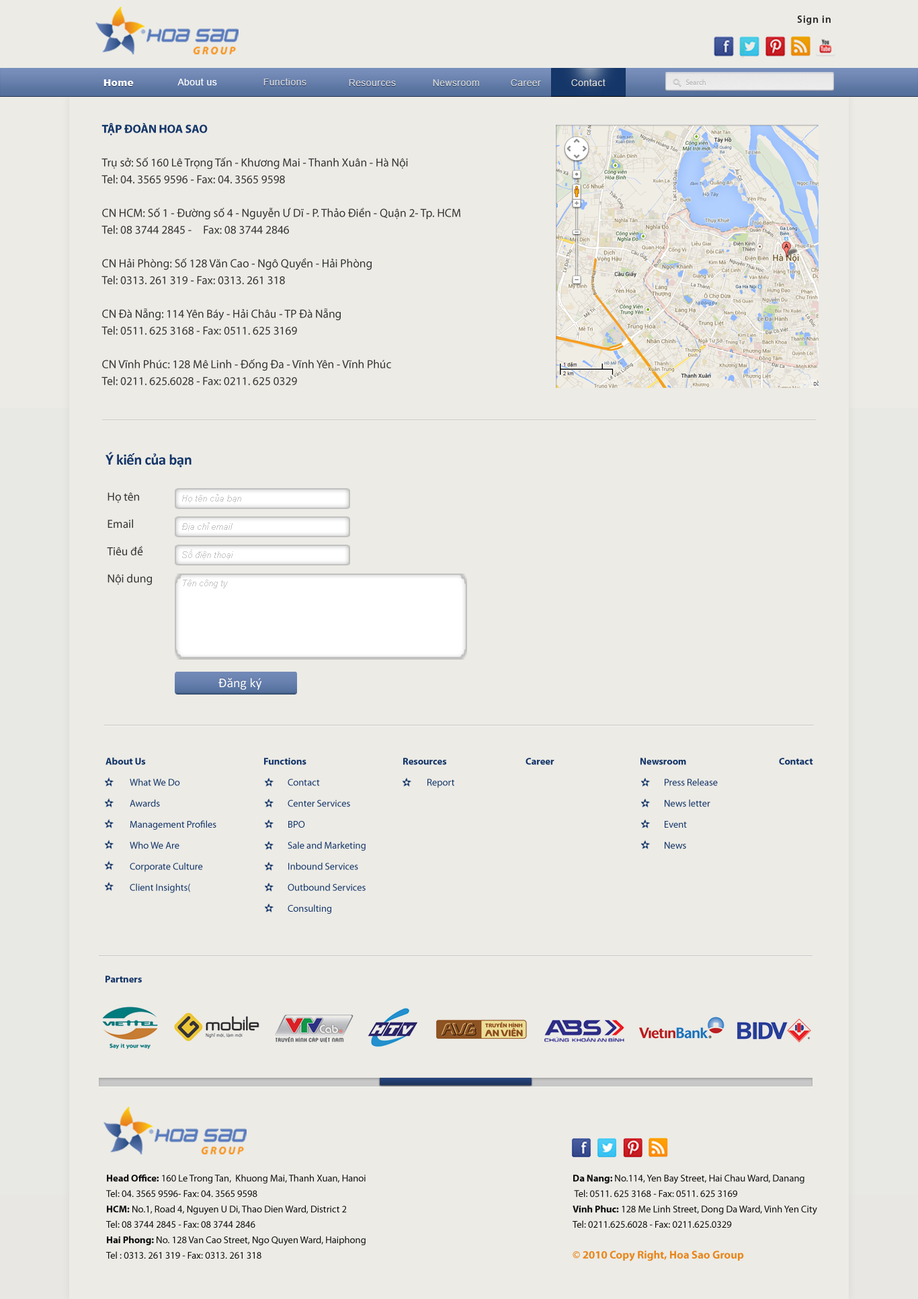
<style>
.page{position:relative;width:918px;height:1299px;background:#ecebe6}
.page>*{position:absolute;margin:0}
.t1{font:10.5px "MyriadPro-Semibold";letter-spacing:0.05em;color:#292929}
.t2{font:9.1px "ArialMT";letter-spacing:0.05em;color:#ffffff}
.t3{font:9.1px "ArialMT";letter-spacing:0.05em;color:#d8d7d7}
.t4{font:9.1px "Arial-Black";letter-spacing:0.05em;color:#ffffff}
.t5{font:7.3px "MyriadPro-Regular";color:#b3b3b3}
.t6{font:11.7px/16.8px "MyriadPro-Regular";color:#353535}
.t7{font:11.7px/16.8px "MyriadPro-Bold";color:#153669}
.t8{font:15.1px "Calibri-Bold";letter-spacing:-0.02em;color:#153669}
.t9{font:11.7px/27.3px "MyriadPro-Regular";color:#353535}
.t10{font:8.7px/28.1px "Arial-ItalicMT";color:#c4c4c4}
.t11{font:13.4px "Calibri";color:#ffffff}
.t12{font:9.8px/21px "MyriadPro-Regular";color:#153669}
.t13{font:9.8px/21px "MyriadPro-Bold";color:#153669}
.t14{font:9.8px "MyriadPro-Bold";color:#153669}
.t15{font:9.8px/15.4px "MyriadPro-Regular";color:#0f0f0f}
.t16{font:9.8px/15.4px "MyriadPro-Bold";color:#0f0f0f}
.t17{font:11.2px "MyriadPro-Bold";color:#e8871c}
</style>
<div class="page">
<p class="t1" style="left:797px;top:15px;width:34px;height:10px">Sign in</p>
<p class="t2" style="left:177px;top:78px;width:40px;height:7px">About us</p>
<p class="t3" style="left:263px;top:78px;width:44px;height:7px">Functions</p>
<p class="t4" style="left:104px;top:79px;width:30px;height:7px">Home</p>
<p class="t3" style="left:349px;top:79px;width:47px;height:7px">Resources</p>
<p class="t3" style="left:433px;top:79px;width:46px;height:7px">Newsroom</p>
<p class="t3" style="left:511px;top:79px;width:30px;height:7px">Career</p>
<p class="t3" style="left:571px;top:79px;width:35px;height:7px">Contact</p>
<p class="t5" style="left:686px;top:79px;width:20px;height:6px">Search</p>
<p class="t6" style="left:101px;top:123px;width:359px;height:262px"><span class="t7">TẬP ĐOÀN HOA SAO<br><br></span>Trụ sở: Số 160 Lê Trọng Tấn - Khương Mai - Thanh Xuân - Hà Nội <br>Tel: 04. 3565 9596 - Fax: 04. 3565 9598<br><br>CN HCM: Số 1 - Đường số 4 - Nguyễn Ư Dĩ - P. Thảo Điền - Quận 2- Tp. HCM<br>Tel: 08 3744 2845 - Fax: 08 3744 2846<br><br>CN Hải Phòng: Số 128 Văn Cao - Ngô Quyền - Hải Phòng<br>Tel: 0313. 261 319 - Fax: 0313. 261 318<br><br>CN Đà Nẵng: 114 Yên Báy - Hải Châu - TP Đà Nẵng<br>Tel: 0511. 625 3168 - Fax: 0511. 625 3169<br><br>CN Vĩnh Phúc: 128 Mê Linh - Đống Đa - Vĩnh Yên - Vĩnh Phúc<br>Tel: 0211. 625.6028 - Fax: 0211. 625 0329</p>
<p class="t8" style="left:106px;top:452px;width:86px;height:15px">Ý kiến của bạn</p>
<p class="t9" style="left:107px;top:492px;width:45px;height:93px">Họ tên <br>Email <br>Tiêu đề <br>Nội dung</p>
<p class="t10" style="left:182px;top:494px;width:59px;height:94px">Họ tên của bạn<br>Địa chỉ email<br>Số điện thoại<br>Tên công ty</p>
<p class="t11" style="left:218px;top:678px;width:44px;height:12px">Đăng ký</p>
<p class="t12" style="left:106px;top:757px;width:110px;height:136px"><span class="t13">About Us<br></span> What We Do <br> Awards <br> Management Profiles<br> Who We Are <br> Corporate Culture <br> Client Insights(</p>
<p class="t12" style="left:264px;top:758px;width:102px;height:155px"><span class="t13">Functions<br></span> Contact <br> Center Services <br> BPO <br> Sale and Marketing<br> Inbound Services <br> Outbound Services <br> Consulting</p>
<p class="t13" style="left:403px;top:758px;width:51px;height:30px">Resources<br><span class="t12"> Report</span></p>
<p class="t14" style="left:526px;top:758px;width:29px;height:7px">Career</p>
<p class="t12" style="left:641px;top:758px;width:77px;height:91px"><span class="t13">Newsroom<br></span> Press Release<br> News letter<br> Event<br> News</p>
<p class="t14" style="left:779px;top:758px;width:34px;height:7px">Contact</p>
<p class="t14" style="left:106px;top:975px;width:36px;height:8px">Partners</p>
<p class="t15" style="left:106px;top:1174px;width:260px;height:84px;text-align:justify"><span class="t16">Head Office:</span> 160 Le Trong Tan,  Khuong Mai, Thanh Xuan, Hanoi<br>Tel: 04. 3565 9596- Fax: 04. 3565 9598<br><span class="t16">HCM:</span> No.1, Road 4, Nguyen U Di, Thao Dien Ward, District 2 <br>Tel: 08 3744 2845 - Fax: 08 3744 2846 <br><span class="t16">Hai Phong:</span> No. 128 Van Cao Street, Ngo Quyen Ward, Haiphong<br>Tel : 0313. 261 319 - Fax: 0313. 261 318</p>
<p class="t15" style="left:573px;top:1174px;width:244px;height:53px;text-align:justify"><span class="t16">Da Nang: </span>No.114, Yen Bay Street, Hai Chau Ward, Danang<br> Tel: 0511. 625 3168 - Fax: 0511. 625 3169<br><span class="t16">Vinh Phuc:</span> 128 Me Linh Street, Dong Da Ward, Vinh Yen City<br>Tel: 0211.625.6028 - Fax: 0211.625.0329</p>
<p class="t17" style="left:573px;top:1250px;width:171px;height:11px">© 2010 Copy Right, Hoa Sao Group</p>
</div>
